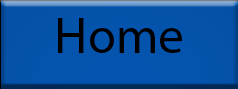
<style>
.page{position:relative;width:238px;height:89px}
.page>*{position:absolute;margin:0}
.t1{font:51px "MyriadPro-Regular";color:#000000}
</style>
<div class="page">
<p class="t1" style="left:58px;top:18px;width:124px;height:35px">Home</p>
</div>
